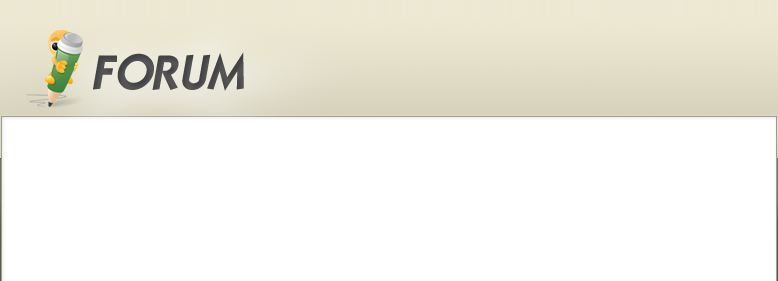
<style>
.page{position:relative;width:778px;height:281px;background:#ffffff}
.page>*{position:absolute;margin:0}
.t1{font:48px "ELEGANCE";letter-spacing:0.05em;color:#575757;font-style:italic}
</style>
<div class="page">
<p class="t1" style="left:93px;top:52px;width:151px;height:39px">FORUM</p>
</div>
